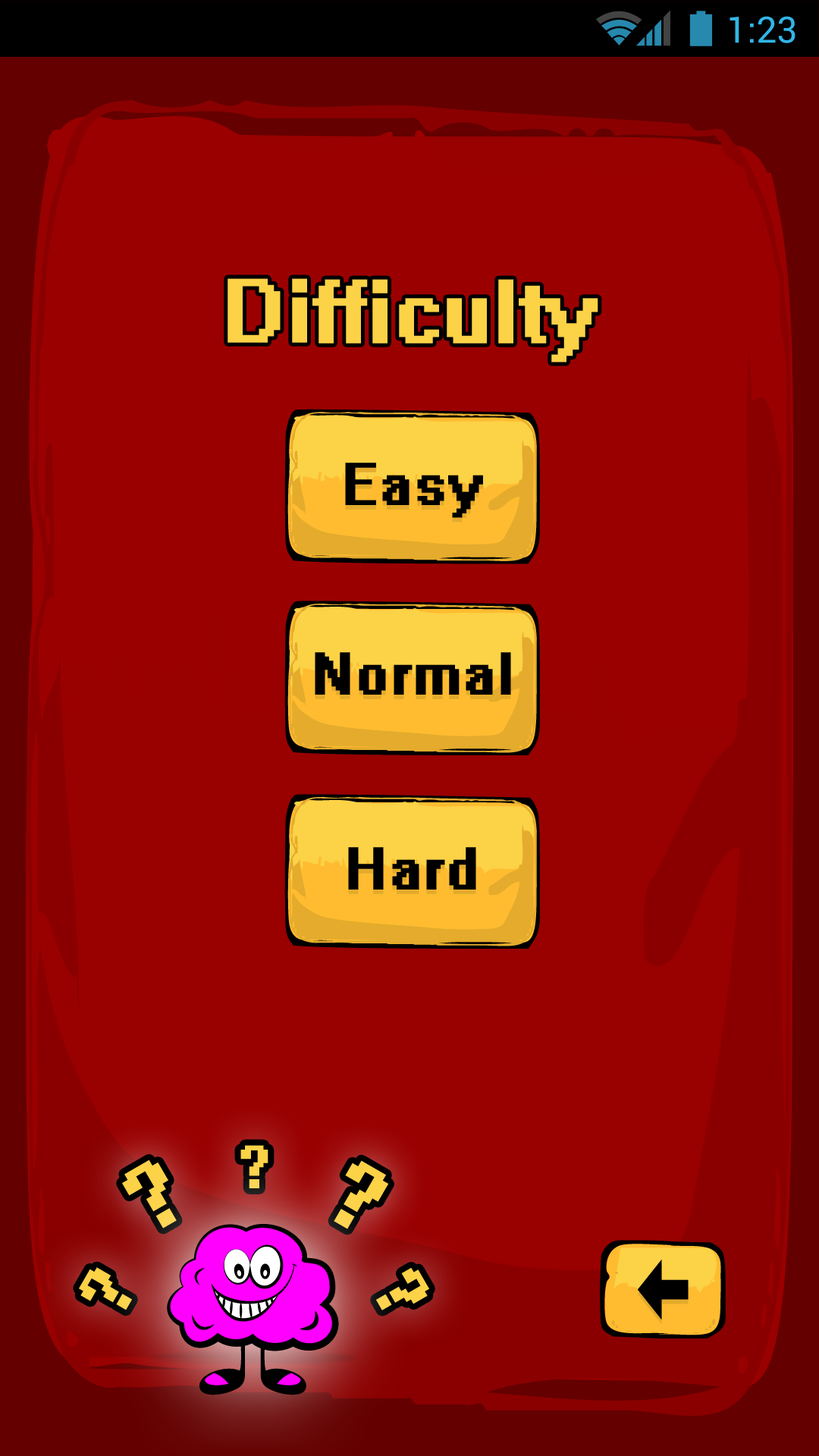
<style>
.page{position:relative;width:819px;height:1456px;background:#9b0000}
.page>*{position:absolute;margin:0}
.t1{font:36.4px "Roboto-Regular";color:#31b6e7}
.t2{font:80px "System";letter-spacing:0.02em;color:#fcd247;font-weight:bold}
.t3{font:53.1px "System";letter-spacing:0.02em;color:#000000;font-weight:bold}
.t4{font:54px "System";letter-spacing:0.02em;color:#fcd248;font-weight:bold}
.t5{font:82.9px "System";letter-spacing:0.02em;color:#fcd248;font-weight:bold}
.t6{font:82.9px "System";letter-spacing:0.02em;color:#fcd247;font-weight:bold}
.t7{font:64.7px "System";letter-spacing:0.02em;color:#fcd248;font-weight:bold}
.t8{font:64.7px "System";letter-spacing:0.02em;color:#fcd247;font-weight:bold}
</style>
<div class="page">
<p class="t1" style="left:730px;top:16px;width:65px;height:27px">1:23</p>
<p class="t2" style="left:227px;top:278px;width:371px;height:84px">Difficulty</p>
<p class="t3" style="left:345px;top:463px;width:138px;height:55px">Easy</p>
<p class="t3" style="left:315px;top:652px;width:196px;height:43px">Normal</p>
<p class="t3" style="left:348px;top:847px;width:128px;height:43px">Hard</p>
<p class="t4" style="left:240px;top:1145px;width:28px;height:43px">?</p>
<p class="t5" style="left:122px;top:1159px;width:55px;height:69px;rotate:-30deg">?</p>
<p class="t6" style="left:334px;top:1160px;width:55px;height:69px;rotate:30deg">?</p>
<p class="t7" style="left:79px;top:1267px;width:53px;height:43px;rotate:-60deg">?</p>
<p class="t8" style="left:376px;top:1267px;width:53px;height:43px;rotate:60deg">?</p>
</div>
